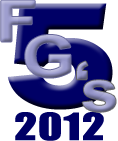
<style>
.page{position:relative;width:118px;height:141px;background:#ffffff}
.page>*{position:absolute;margin:0}
.t1{font:56.7px "Arial-BoldMT";color:#9999cc;font-weight:bold;scale:1.19 1}
.t2{font:156.3px "FranklinGothic-Heavy";font-weight:bold;scale:1.23 1}
.t3{font:34.8px "Impact";color:#000066;font-weight:bold;scale:1.3 1}
</style>
<div class="page">
<p class="t1" style="left:1px;top:0px;width:34px;height:42px;opacity:0.95">F</p>
<p class="t2" style="left:7px;top:3px;width:106px;height:107px">5</p>
<p class="t1" style="left:25px;top:35px;width:46px;height:43px">G</p>
<p class="t1" style="left:77px;top:61px;width:11px;height:19px;opacity:0.96">‘</p>
<p class="t3" style="left:15px;top:112px;width:89px;height:29px">2012</p>
</div>
